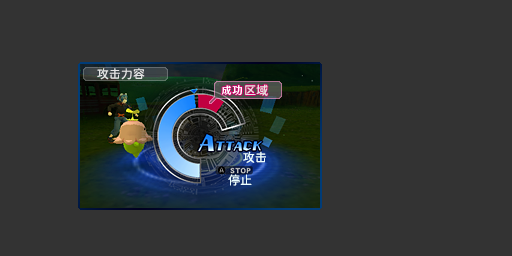
<style>
.page{position:relative;width:512px;height:256px;background:#333333}
.page>*{position:absolute;margin:0}
.t1{font:12px "jiangchengyuanti-400W";color:#e4e4e4}
.t2{font:12px "jiangchengyuanti-400W";color:#ecffff}
</style>
<div class="page">
<p class="t1" style="left:97px;top:68px;width:48px;height:12px">攻击力容</p>
<p class="t1" style="left:245px;top:84px;width:23px;height:12px">区域</p>
<p class="t2" style="left:243px;top:151px;width:23px;height:12px">攻击</p>
<p class="t2" style="left:228px;top:174px;width:24px;height:12px">停止</p>
</div>
